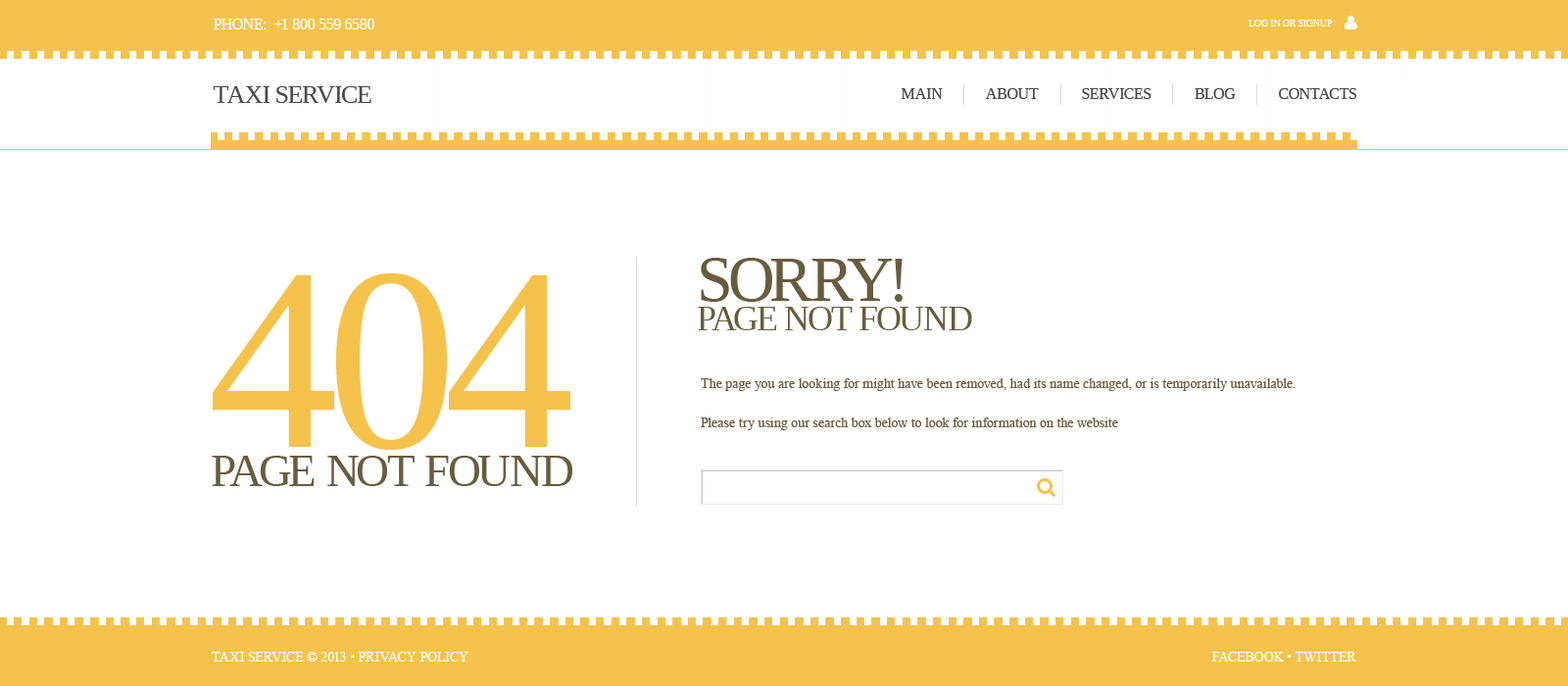
<style>
.page{position:relative;width:1568px;height:686px;background:#ffffff}
.page>*{position:absolute;margin:0}
.t1{font:15.7px "Tinos";letter-spacing:-0.02em;color:#ffffff;text-transform:uppercase}
.t2{font:9.8px "Tinos";letter-spacing:-0.02em;color:#ffffff;text-transform:uppercase}
.t3{font:25.5px "Tinos";letter-spacing:-0.04em;color:#4a4a4a;text-transform:uppercase}
.t4{font:15.7px "Tinos";letter-spacing:-0.02em;color:#4a4a4a;text-transform:uppercase}
.t5{font:35.3px/29.4px "Tinos";letter-spacing:-0.04em;color:#695c3e;text-transform:uppercase}
.t6{font:64.7px/29.4px "Tinos";letter-spacing:-0.04em;color:#695c3e;text-transform:uppercase}
.t7{font:46.1px/39.2px "Tinos";letter-spacing:-0.04em;color:#695c3e;text-transform:uppercase}
.t8{font:260.7px/29.4px "Tinos";letter-spacing:-0.04em;color:#f5c34c;text-transform:uppercase}
.t9{font:13.7px/19.6px "TimesNewRomanPSMT";color:#695c3e}
.t10{font:13.7px "TimesNewRomanPSMT";color:#ffffff;text-transform:uppercase}
</style>
<div class="page">
<p class="t1" style="left:214px;top:19px;width:160px;height:10px">phone:  +1 800 559 6580</p>
<p class="t2" style="left:1249px;top:20px;width:84px;height:6px">log in or signup</p>
<p class="t3" style="left:213px;top:86px;width:158px;height:17px">taxi service</p>
<p class="t4" style="left:901px;top:88px;width:455px;height:11px">main            about            services            blog            contacts</p>
<p class="t5" style="left:698px;top:258px;width:274px;height:72px"><span class="t6">Sorry!<br></span>Page Not Found</p>
<p class="t7" style="left:212px;top:272px;width:360px;height:214px"><span class="t8">404<br></span>Page Not Found</p>
<p class="t9" style="left:701px;top:378px;width:595px;height:52px">The page you are looking for might have been removed, had its name changed, or is temporarily unavailable.<br><br>Please try using our search box below to look for information on the website</p>
<p class="t10" style="left:212px;top:652px;width:256px;height:10px">Taxi Service © 2013 • Privacy Policy</p>
<p class="t10" style="left:1211px;top:652px;width:145px;height:10px">facebook • twitter</p>
</div>
